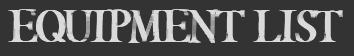
<style>
.page{position:relative;width:354px;height:56px;background:#333333}
.page>*{position:absolute;margin:0}
.t1{font:46.1px "IStillKnow";color:#dadada;scale:0.81 1}
</style>
<div class="page">
<p class="t1" style="left:8px;top:9px;width:332px;height:34px">Equipment list</p>
<p class="t1" style="left:9px;top:9px;width:332px;height:34px">Equipment list</p>
<p class="t1" style="left:10px;top:9px;width:332px;height:34px">Equipment list</p>
<p class="t1" style="left:11px;top:9px;width:332px;height:34px">Equipment list</p>
</div>
